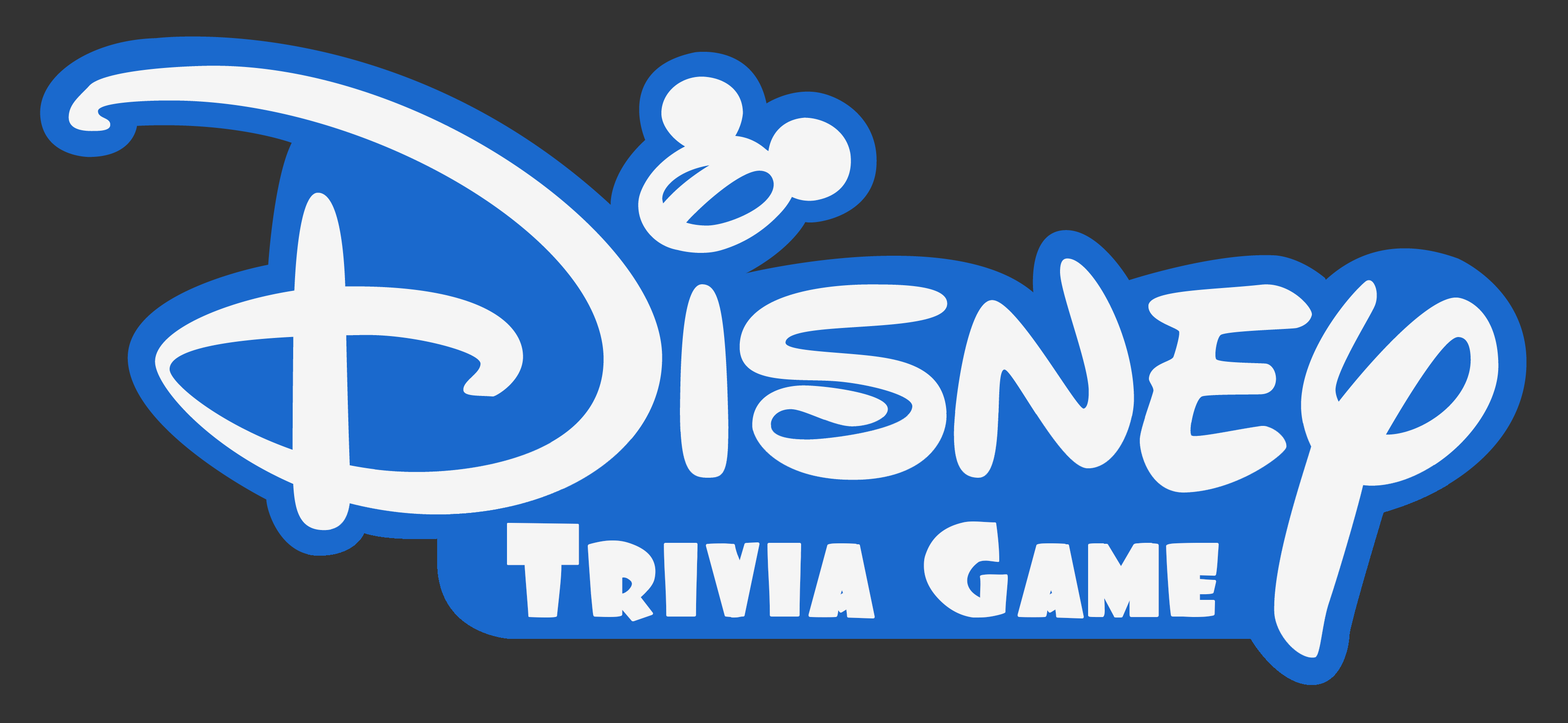
<style>
.page{position:relative;width:1568px;height:723px;background:#333333}
.page>*{position:absolute;margin:0}
.t1{font:118.8px "Foo";color:#f5f5f5}
</style>
<div class="page">
<p class="t1" style="left:507px;top:521px;width:712px;height:100px">Trivia Game</p>
</div>
